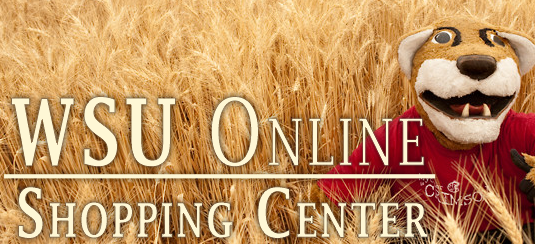
<style>
.page{position:relative;width:535px;height:244px}
.page>*{position:absolute;margin:0}
.t1{font:93px "LucidaFax";letter-spacing:0.05em;color:#fef7d5;font-variant:small-caps;scale:0.76 1}
.t2{font:93px "LucidaFax-Demi";letter-spacing:0.05em;color:#fef7d5;font-variant:small-caps;scale:0.76 1}
.t3{font:68.2px "LucidaFax-Demi";letter-spacing:0.05em;color:#fef7d5;font-variant:small-caps;scale:0.76 1}
</style>
<div class="page">
<p class="t1" style="left:11px;top:96px;width:413px;height:71px"><span class="t2">WSU</span> Online</p>
<p class="t3" style="left:18px;top:186px;width:410px;height:53px">Shopping Center</p>
</div>
